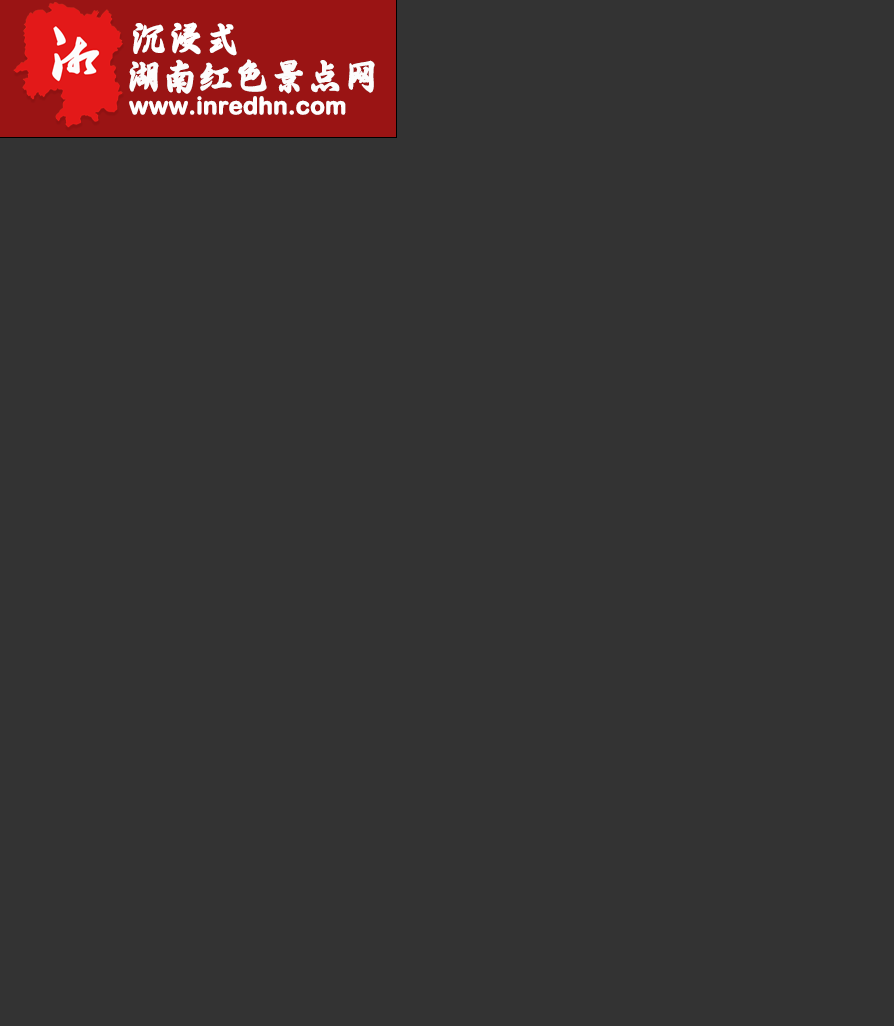
<style>
.page{position:relative;width:894px;height:1026px;background:#333333}
.page>*{position:absolute;margin:0}
.t1{font:36px "SJxingkai-C-Regular";letter-spacing:-0.015em;color:#ffffff;font-weight:bold}
.t2{font:36px "SJxingkai-C-Regular";letter-spacing:-0.015em;color:#fcfcfc;font-weight:bold}
.t3{font:24px "ArialRoundedMTBold";letter-spacing:-0.015em;color:#fffefe;font-weight:bold}
</style>
<div class="page">
<p class="t1" style="left:133px;top:22px;width:104px;height:34px">沉浸式</p>
<p class="t2" style="left:129px;top:59px;width:246px;height:35px">湖南红色景点网</p>
<p class="t3" style="left:129px;top:96px;width:217px;height:19px">www.inredhn.com</p>
</div>
